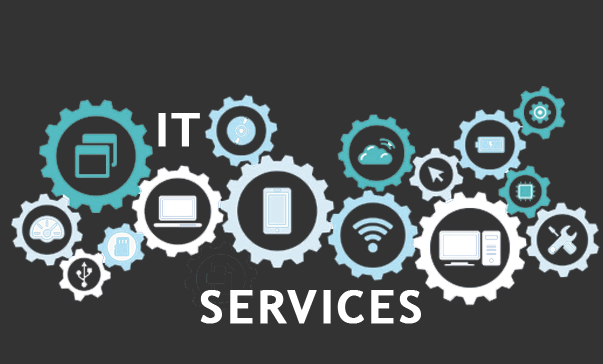
<style>
.page{position:relative;width:603px;height:364px;background:#333333}
.page>*{position:absolute;margin:0}
.t1{font:46.5px "TrebuchetMS-Bold";letter-spacing:0.05em;color:#ffffff;font-weight:bold}
</style>
<div class="page">
<p class="t1" style="left:158px;top:113px;width:42px;height:34px">IT</p>
<p class="t1" style="left:200px;top:290px;width:221px;height:34px">SERVICES</p>
</div>
